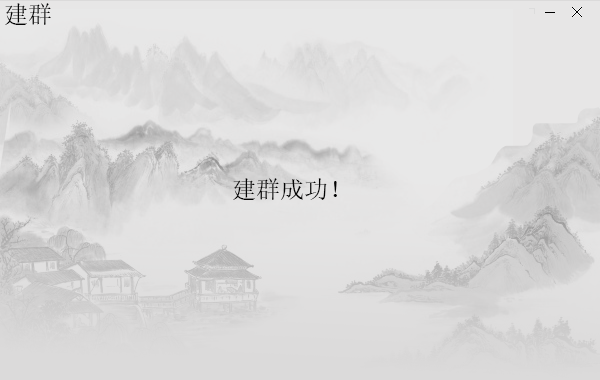
<style>
.page{position:relative;width:600px;height:380px}
.page>*{position:absolute;margin:0}
.t1{font:24px "SimSun";color:#020202}
</style>
<div class="page">
<p class="t1" style="left:5px;top:3px;width:46px;height:22px">建群</p>
<p class="t1" style="left:233px;top:178px;width:104px;height:22px">建群成功！</p>
</div>
